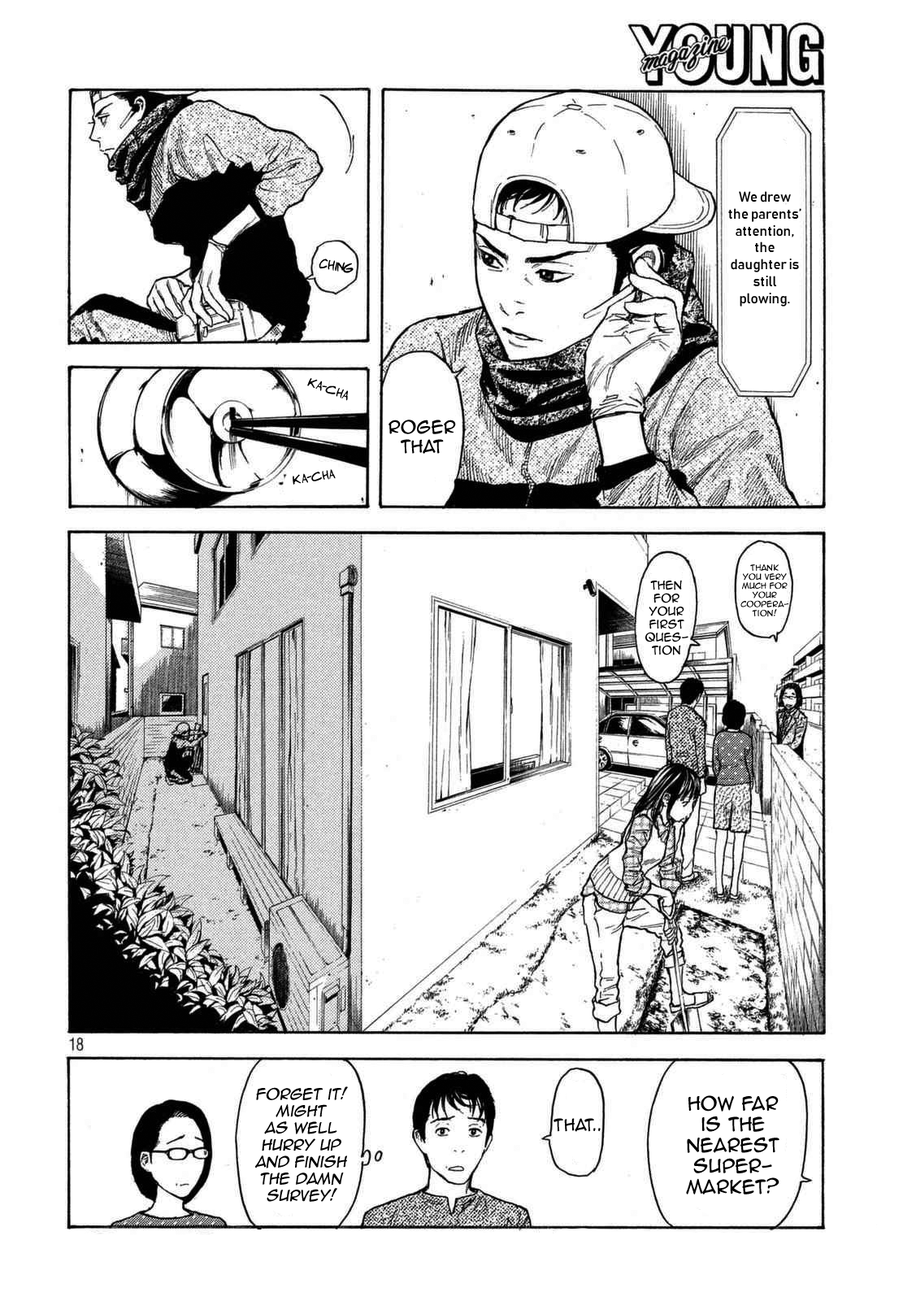
<style>
.page{position:relative;width:916px;height:1301px;background:#ffffff}
.page>*{position:absolute;margin:0}
.t1{font:14.1px "Bahnschrift";color:#000000}
.t2{font:13px "AdamWarrenpro";color:#000000}
.t3{font:11.9px "AdamWarrenpro";color:#000000}
.t4{font:16.3px "AnimeAce2.0BB";color:#000000}
.t5{font:7.6px "AnimeAce2.0BB";color:#000000}
.t6{font:10.8px "AnimeAce2.0BB";color:#000000}
.t7{font:14.1px "AnimeAce2.0BB";color:#000000;font-style:italic}
.t8{font:17.4px "AnimeAce2.0BB";color:#000000}
.t9{font:15.2px "AnimeAce2.0BB";color:#000000}
</style>
<div class="page">
<p class="t1" style="left:729px;top:191px;width:73px;height:116px;text-align:center">We drew <br>the parents’ attention, the daughter is still plowing.</p>
<p class="t2" style="left:319px;top:259px;width:35px;height:14px;rotate:10deg">Ching</p>
<p class="t3" style="left:307px;top:378px;width:41px;height:23px;rotate:20deg">Ka-cha</p>
<p class="t4" style="left:389px;top:420px;width:67px;height:34px;text-align:center">Roger that</p>
<p class="t3" style="left:293px;top:469px;width:43px;height:16px;rotate:-9deg">Ka-cha</p>
<p class="t5" style="left:741px;top:564px;width:48px;height:53px;text-align:center">Thank <br>you very much for your coopera-<br>tion!</p>
<p class="t6" style="left:646px;top:580px;width:43px;height:75px;text-align:center">Then for your first ques-tion</p>
<p class="t7" style="left:255px;top:1086px;width:93px;height:116px;text-align:center">Forget it! Might <br>as well hurry up and finish the Damn survey!</p>
<p class="t8" style="left:686px;top:1095px;width:94px;height:100px;text-align:center">How far <br>is the nearest super-<br>market?</p>
<p class="t9" style="left:554px;top:1118px;width:47px;height:14px">That..</p>
</div>
